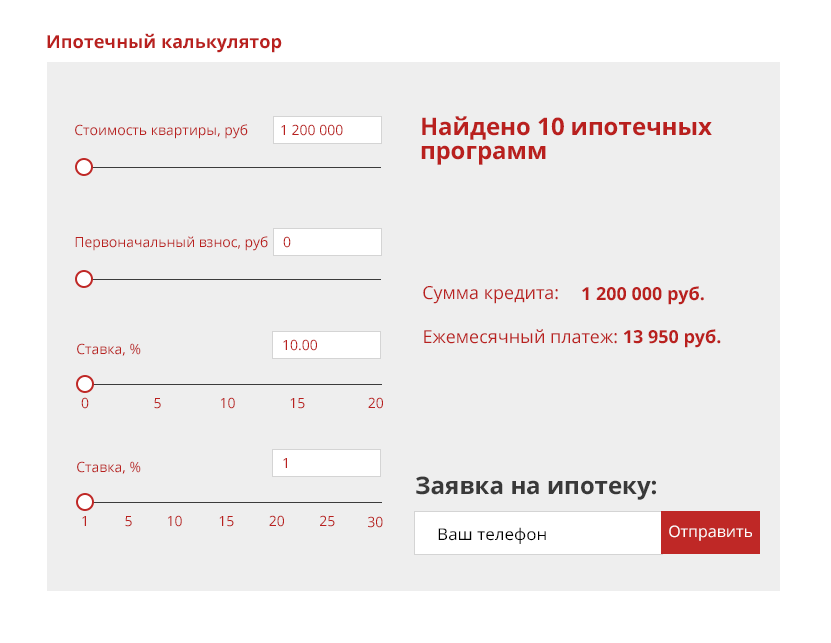
<style>
.page{position:relative;width:831px;height:643px;background:#eeeeee}
.page>*{position:absolute;margin:0}
.t1{font:18px "OpenSans-Bold";color:#b9201e}
.t2{font:14px "OpenSans";color:#b9201e}
.t3{font:24px/24px "OpenSans-Bold";color:#b9201e}
.t4{font:18px "OpenSans";color:#b9201e}
.t5{font:14px "OpenSans"}
.t6{font:24px "OpenSans-Bold";color:#393939}
.t7{font:16.2px "OpenSans";color:#000000;scale:1.05 1}
.t8{font:16px "OpenSans";color:#fefefe}
</style>
<div class="page">
<p class="t1" style="left:47px;top:33px;width:235px;height:20px">Ипотечный калькулятор</p>
<p class="t2" style="left:75px;top:124px;width:173px;height:15px">Стоимость квартиры, руб</p>
<p class="t2" style="left:281px;top:124px;width:62px;height:12px">1 200 000</p>
<p class="t3" style="left:421px;top:116px;width:291px;height:49px">Найдено 10 ипотечных <br>программ</p>
<p class="t2" style="left:75px;top:236px;width:193px;height:15px">Первоначальный взнос, руб</p>
<p class="t2" style="left:283px;top:236px;width:8px;height:12px">0</p>
<p class="t4" style="left:423px;top:286px;width:135px;height:18px">Сумма кредита:</p>
<p class="t1" style="left:582px;top:286px;width:122px;height:19px">1 200 000 руб.</p>
<p class="t4" style="left:424px;top:329px;width:297px;height:19px">Ежемесячный платеж: <span class="t1">13 950 руб.</span></p>
<p class="t2" style="left:283px;top:339px;width:34px;height:12px">10.00</p>
<p class="t2" style="left:77px;top:343px;width:64px;height:13px">Ставка, %</p>
<p class="t2" style="left:81px;top:397px;width:8px;height:12px">0</p>
<p class="t2" style="left:154px;top:398px;width:7px;height:11px">5</p>
<p class="t5" style="left:221px;top:397px;width:14px;height:12px">10</p>
<p class="t2" style="left:290px;top:398px;width:15px;height:11px">15</p>
<p class="t2" style="left:368px;top:397px;width:15px;height:12px">20</p>
<p class="t2" style="left:77px;top:461px;width:64px;height:13px">Ставка, %</p>
<p class="t2" style="left:283px;top:458px;width:4px;height:10px">1</p>
<p class="t6" style="left:416px;top:476px;width:240px;height:24px">Заявка на ипотеку:</p>
<p class="t2" style="left:82px;top:516px;width:4px;height:10px">1</p>
<p class="t2" style="left:125px;top:516px;width:7px;height:11px">5</p>
<p class="t5" style="left:168px;top:515px;width:14px;height:12px">10</p>
<p class="t2" style="left:219px;top:516px;width:15px;height:11px">15</p>
<p class="t2" style="left:269px;top:515px;width:15px;height:12px">20</p>
<p class="t2" style="left:320px;top:515px;width:15px;height:12px">25</p>
<p class="t2" style="left:368px;top:516px;width:15px;height:12px">30</p>
<p class="t7" style="left:438px;top:527px;width:108px;height:17px">Ваш телефон</p>
<p class="t8" style="left:669px;top:525px;width:83px;height:16px">Отправить</p>
</div>
